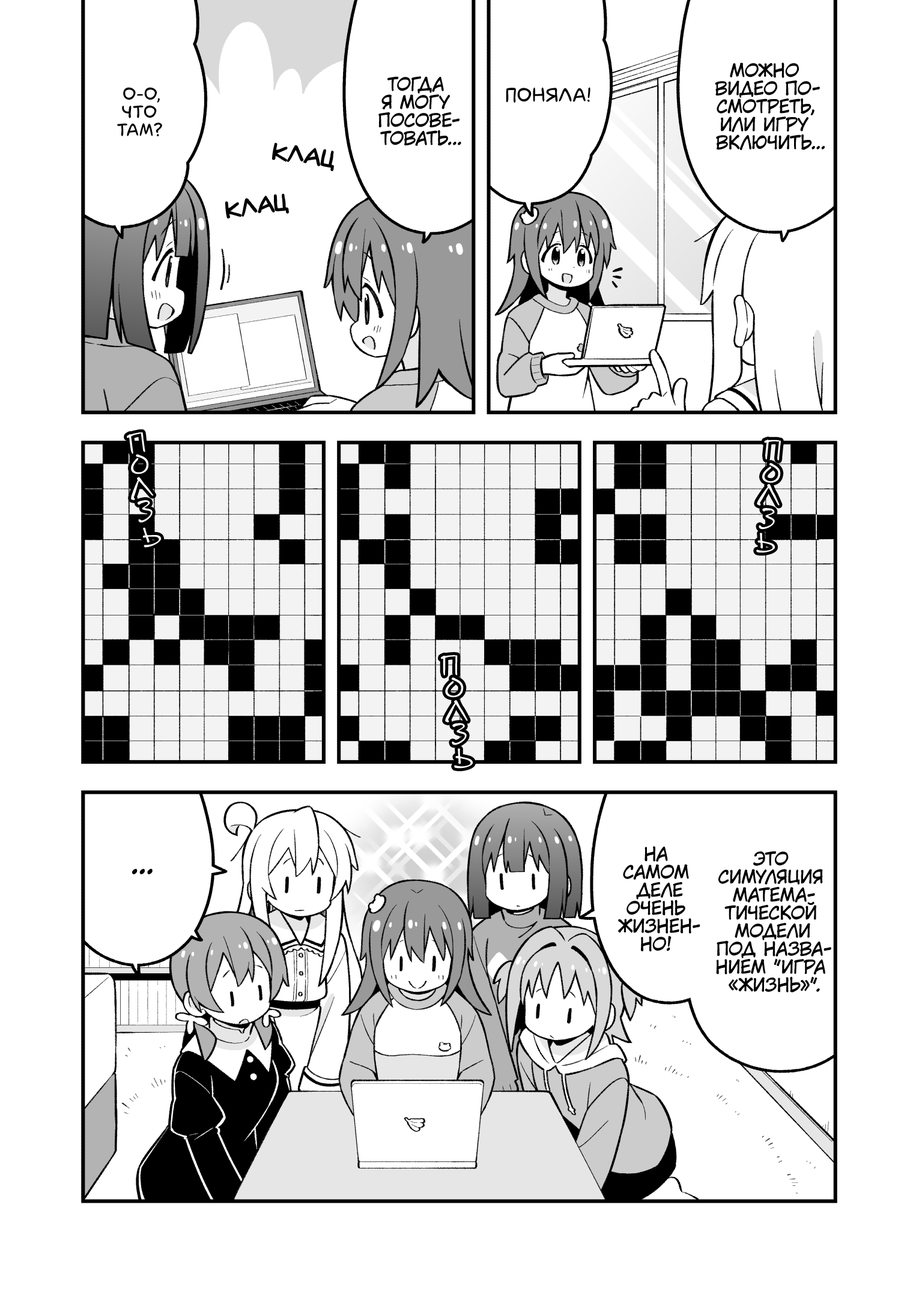
<style>
.page{position:relative;width:919px;height:1297px;background:#ffffff}
.page>*{position:absolute;margin:0}
.t1{font:18px "KuraiVoice2";color:#000000;text-transform:uppercase}
.t2{font:18px "laCartoonerie";color:#000000;text-transform:uppercase}
.t3{font:19.8px "laCartoonerie";color:#000000;text-transform:uppercase}
.t4{font:21.6px "v_Augie";color:#000000;text-transform:uppercase}
.t5{font:28.8px "DSNote";color:#ffffff}
.t6{font:28.8px "KuraiVoice2";color:#000000;text-transform:uppercase}
</style>
<div class="page">
<p class="t1" style="left:715px;top:62px;width:110px;height:88px;text-align:center">Можно<br>видео по-<br>смотреть,<br>или игру<br>включить...</p>
<p class="t1" style="left:378px;top:76px;width:83px;height:70px;text-align:center">Тогда<br>я могу<br>посове-<br>товать...</p>
<p class="t2" style="left:117px;top:87px;width:45px;height:49px;text-align:center">О-о,<br>что<br>там?</p>
<p class="t3" style="left:506px;top:87px;width:84px;height:16px">Поняла!</p>
<p class="t4" style="left:273px;top:143px;width:60px;height:28px;rotate:8deg">клац</p>
<p class="t4" style="left:226px;top:194px;width:62px;height:24px;rotate:-8deg">клац</p>
<p class="t5" style="left:127px;top:432px;width:18px;height:22px;rotate:-10deg">п</p>
<p class="t5" style="left:764px;top:440px;width:17px;height:21px;rotate:4deg">п</p>
<p class="t5" style="left:131px;top:454px;width:18px;height:21px;rotate:-10deg">о</p>
<p class="t5" style="left:762px;top:463px;width:19px;height:20px">о</p>
<p class="t5" style="left:131px;top:477px;width:23px;height:23px;rotate:-8deg">л</p>
<p class="t5" style="left:757px;top:484px;width:23px;height:22px;rotate:5deg">л</p>
<p class="t5" style="left:138px;top:500px;width:15px;height:23px;rotate:-10deg">з</p>
<p class="t5" style="left:759px;top:508px;width:16px;height:22px;rotate:5deg">з</p>
<p class="t5" style="left:142px;top:527px;width:20px;height:21px;rotate:-17deg">ь</p>
<p class="t5" style="left:756px;top:533px;width:19px;height:20px;rotate:-3deg">ь</p>
<p class="t5" style="left:440px;top:655px;width:18px;height:21px;rotate:-2deg">п</p>
<p class="t5" style="left:445px;top:678px;width:19px;height:20px;rotate:-4deg">о</p>
<p class="t5" style="left:445px;top:700px;width:23px;height:23px;rotate:1deg">л</p>
<p class="t5" style="left:452px;top:723px;width:15px;height:22px;rotate:-5deg">з</p>
<p class="t5" style="left:454px;top:748px;width:19px;height:21px;rotate:-3deg">ь</p>
<p class="t1" style="left:618px;top:846px;width:82px;height:106px;text-align:center">На<br>самом<br>деле<br>очень<br>жизнен-<br>но!</p>
<p class="t1" style="left:716px;top:851px;width:115px;height:142px;text-align:center">Это<br>симуляция<br>матема-<br>тической<br>модели<br>под назва-<br>нием "Игра<br>«Жизнь»".</p>
<p class="t6" style="left:132px;top:869px;width:21px;height:6px">...</p>
</div>
